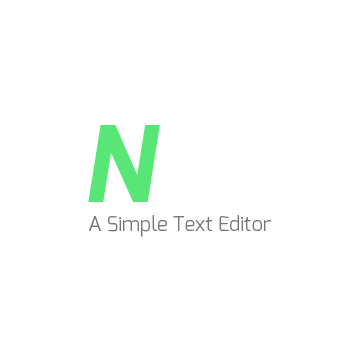
<style>
.page{position:relative;width:360px;height:360px;background:#ffffff}
.page>*{position:absolute;margin:0}
.t1{font:105.3px "Exo-BoldItalic";color:#58e776}
.t2{font:20px "Exo-Light";color:#757575}
</style>
<div class="page">
<p class="t1" style="left:88px;top:125px;width:72px;height:77px">N</p>
<p class="t2" style="left:89px;top:215px;width:182px;height:22px">A Simple Text Editor</p>
</div>
